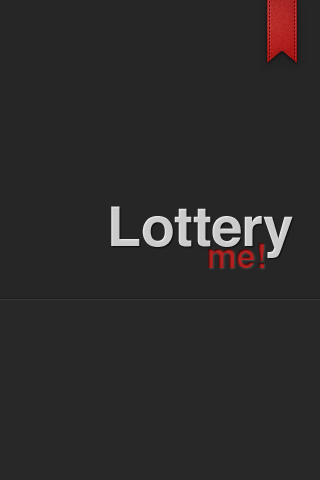
<style>
.page{position:relative;width:320px;height:480px;background:#262626}
.page>*{position:absolute;margin:0}
.t1{font:55px "Helvetica-Bold";color:#000000}
.t2{font:34px "Helvetica-Bold";color:#000000}
</style>
<div class="page">
<p class="t1" style="left:111px;top:206px;width:182px;height:52px">Lottery</p>
<p class="t2" style="left:208px;top:243px;width:56px;height:25px">me!</p>
</div>
